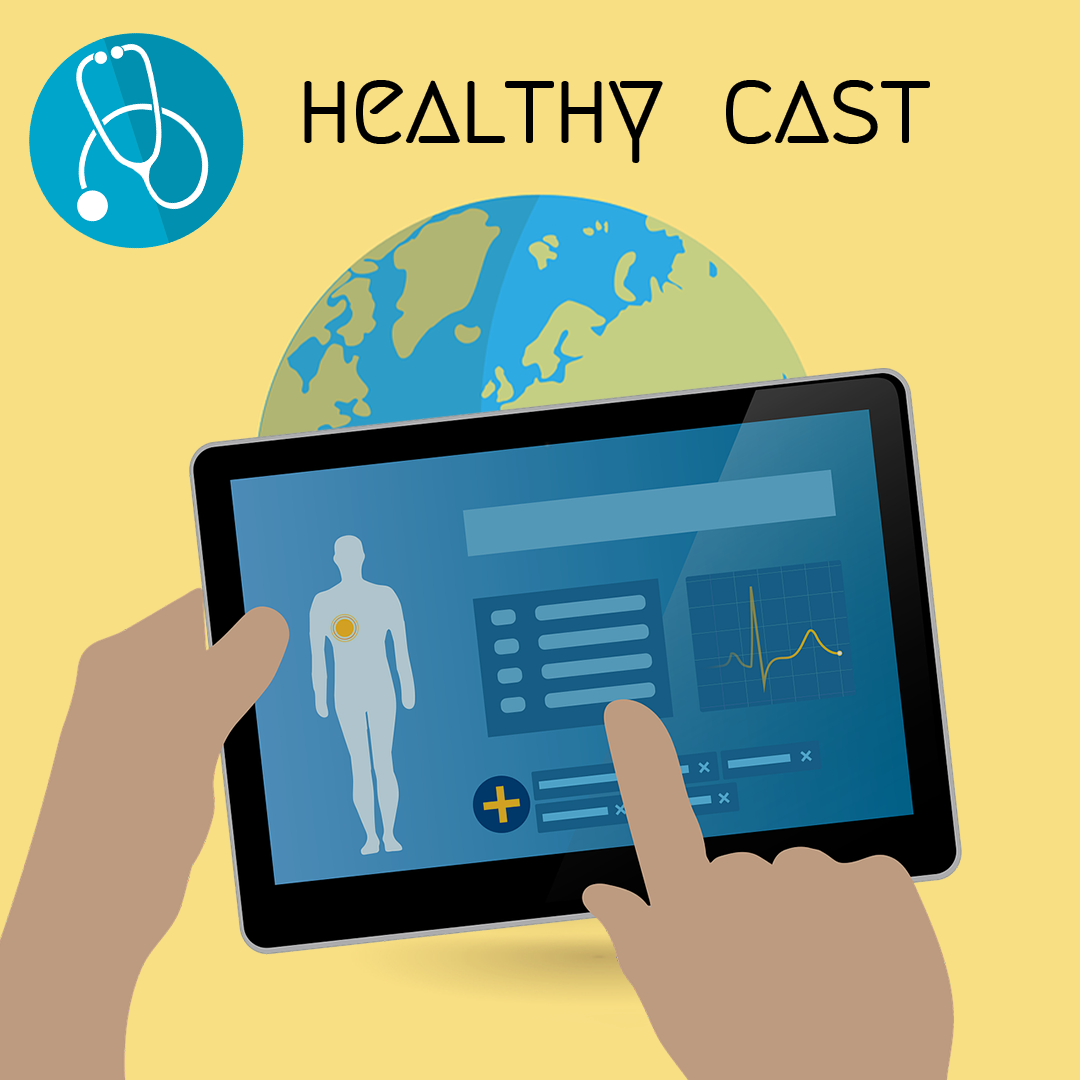
<style>
.page{position:relative;width:1080px;height:1080px;background:#f9df84}
.page>*{position:absolute;margin:0}
.t1{font:100px "Megrim";color:#000000}
</style>
<div class="page">
<p class="t1" style="left:306px;top:82px;width:622px;height:79px">healthy  cast</p>
</div>
